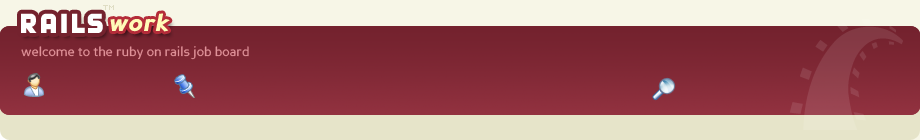
<style>
.page{position:relative;width:920px;height:140px}
.page>*{position:absolute;margin:0}
.t1{font:6px "Visitor -BRK-";color:#dfddc4}
.t2{font:24px "PerspectiveSansBlackItalic";color:#fffbb8}
.t3{font:13px "PerspectiveSans";color:#e09299}
</style>
<div class="page">
<p class="t1" style="left:103px;top:5px;width:11px;height:5px">TM</p>
<p class="t2" style="left:110px;top:13px;width:60px;height:19px">work</p>
<p class="t3" style="left:21px;top:46px;width:228px;height:14px">welcome to the ruby on rails job board</p>
</div>
